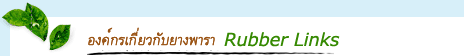
<style>
.page{position:relative;width:464px;height:56px;background:#ffffff}
.page>*{position:absolute;margin:0}
.t1{font:20px "DilleniaUPCItalic";color:#995212;font-weight:bold}
.t2{font:18px "Verdana-Italic";letter-spacing:-0.01em;color:#358901}
</style>
<div class="page">
<p class="t1" style="left:88px;top:27px;width:127px;height:19px">Í§¤ì¡Ãà¡ÕèÂÇ¡ÑºÂÒ§¾ÒÃÒ</p>
<p class="t2" style="left:224px;top:32px;width:116px;height:15px">Rubber Links</p>
</div>
